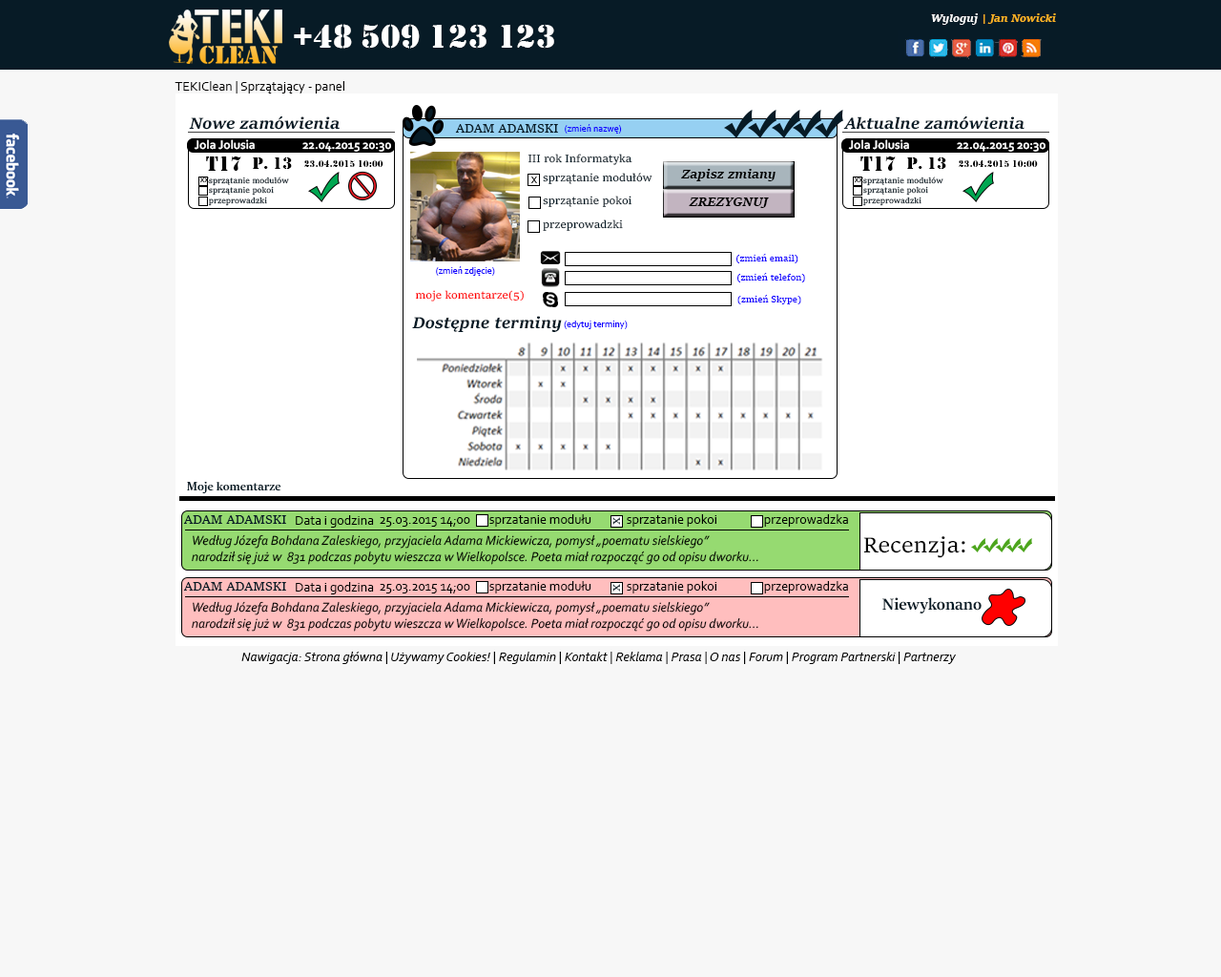
<style>
.page{position:relative;width:1221px;height:977px;background:#f7f7f7}
.page>*{position:absolute;margin:0}
.t1{font:11.4px "SitkaText-BoldItalic";color:#fcb324}
.t2{font:11.4px "SitkaText-BoldItalic";color:#ffffff}
.t3{font:34.3px "Stencil";color:#ffffff}
.t4{font:13.4px "Corbel";color:#010000}
.t5{font:17.2px "SitkaText-BoldItalic";color:#071b26}
.t6{font:13.4px "SitkaText";color:#071b26}
.t7{font:9.5px "Corbel";color:#1200ff}
.t8{font:12.6px "Corbel-Bold";color:#ffffff}
.t9{font:11.4px "SitkaText";color:#071b26}
.t10{font:21.1px "Stencil";color:#000000}
.t11{font:16.9px "Stencil";color:#000000}
.t12{font:9.8px "Stencil";color:#000000}
.t13{font:11.4px/23.7px "SitkaText";color:#071b26}
.t14{font:13.4px "SitkaText-BoldItalic";color:#000000}
.t15{font:13.4px "Corbel";color:#000000}
.t16{font:9.8px "Corbel";color:#000000}
.t17{font:8.4px "SitkaText";color:#071b26}
.t18{font:9.5px "SitkaText";color:#1200ff}
.t19{font:11.4px "SitkaText";color:#ff0000}
.t20{font:13.4px "SitkaBanner-Bold";color:#071b26}
.t21{font:13.8px "SitkaText";color:#071b26}
.t22{font:13.4px "Corbel-Italic";color:#000000}
.t23{font:23.4px "SitkaText";color:#000000}
.t24{font:18px "SitkaBanner-Bold";color:#071b26}
.t25{font:13.4px "Corbel-Italic";color:#010101}
</style>
<div class="page">
<p class="t1" style="left:931px;top:13px;width:125px;height:12px"><span class="t2">Wyloguj </span>| Jan Nowicki</p>
<p class="t3" style="left:294px;top:24px;width:260px;height:25px">+48 509 123 123</p>
<p class="t4" style="left:175px;top:81px;width:169px;height:12px">TEKIClean | Sprzątający - panel</p>
<p class="t5" style="left:189px;top:116px;width:151px;height:14px">Nowe zamówienia</p>
<p class="t6" style="left:455px;top:124px;width:103px;height:9px">ADAM ADAMSKI</p>
<p class="t7" style="left:565px;top:124px;width:57px;height:10px">(zmień nazwę)</p>
<p class="t5" style="left:843px;top:116px;width:181px;height:14px">Aktualne zamówienia</p>
<p class="t8" style="left:848px;top:139px;width:61px;height:11px">Jola Jolusia</p>
<p class="t8" style="left:957px;top:142px;width:88px;height:10px">22.04.2015 20:30</p>
<p class="t9" style="left:527px;top:154px;width:105px;height:11px">III rok Informatyka</p>
<p class="t10" style="left:860px;top:156px;width:36px;height:15px">T17</p>
<p class="t11" style="left:907px;top:157px;width:39px;height:12px">p. 13</p>
<p class="t12" style="left:959px;top:160px;width:79px;height:7px">23.04.2015 10:00</p>
<p class="t13" style="left:543px;top:173px;width:109px;height:58px">sprzątanie modułów<br>sprzątanie pokoi<br>przeprowadzki</p>
<p class="t14" style="left:681px;top:169px;width:94px;height:12px">Zapisz zmiany</p>
<p class="t15" style="left:530px;top:176px;width:7px;height:7px">x</p>
<p class="t16" style="left:855px;top:177px;width:8px;height:6px">xx</p>
<p class="t17" style="left:862px;top:176px;width:81px;height:30px">sprzątanie modułów<br>sprzątanie pokoi<br>przeprowadzki</p>
<p class="t14" style="left:689px;top:197px;width:80px;height:11px">ZREZYGNUJ</p>
<p class="t18" style="left:736px;top:254px;width:62px;height:9px">(zmień email)</p>
<p class="t7" style="left:436px;top:266px;width:59px;height:10px">(zmień zdjęcie)</p>
<p class="t18" style="left:737px;top:273px;width:68px;height:9px">(zmień telefon)</p>
<p class="t19" style="left:415px;top:290px;width:109px;height:11px">moje komentarze(5)</p>
<p class="t18" style="left:737px;top:295px;width:64px;height:9px">(zmień Skype)</p>
<p class="t5" style="left:412px;top:316px;width:150px;height:16px">Dostępne terminy</p>
<p class="t7" style="left:564px;top:320px;width:64px;height:9px">(edytuj terminy)</p>
<p class="t20" style="left:187px;top:482px;width:94px;height:11px">Moje komentarze</p>
<p class="t6" style="left:183px;top:515px;width:103px;height:9px">ADAM ADAMSKI</p>
<p class="t15" style="left:296px;top:515px;width:78px;height:12px">Data i godzina</p>
<p class="t15" style="left:380px;top:517px;width:90px;height:10px">25.03.2015 14;00</p>
<p class="t15" style="left:489px;top:514px;width:359px;height:13px">sprzatanie modułu  sprzatanie pokoi   przeprowadzka</p>
<p class="t21" style="left:612px;top:517px;width:8px;height:8px">x</p>
<p class="t22" style="left:192px;top:534px;width:566px;height:31px">Według Józefa Bohdana Zaleskiego, przyjaciela Adama Mickiewicza, pomysł „poematu sielskiego” <br>narodził się już w  831 podczas pobytu wieszcza w Wielkopolsce. Poeta miał rozpocząć go od opisu dworku...</p>
<p class="t23" style="left:863px;top:536px;width:102px;height:22px">Recenzja:</p>
<p class="t6" style="left:183px;top:582px;width:103px;height:8px">ADAM ADAMSKI</p>
<p class="t15" style="left:296px;top:582px;width:78px;height:12px">Data i godzina</p>
<p class="t15" style="left:489px;top:581px;width:359px;height:12px">sprzatanie modułu  sprzatanie pokoi   przeprowadzka</p>
<p class="t15" style="left:380px;top:584px;width:90px;height:9px">25.03.2015 14;00</p>
<p class="t21" style="left:612px;top:584px;width:8px;height:7px">x</p>
<p class="t22" style="left:192px;top:601px;width:566px;height:30px">Według Józefa Bohdana Zaleskiego, przyjaciela Adama Mickiewicza, pomysł „poematu sielskiego” <br>narodził się już w  831 podczas pobytu wieszcza w Wielkopolsce. Poeta miał rozpocząć go od opisu dworku...</p>
<p class="t24" style="left:882px;top:597px;width:99px;height:16px">Niewykonano</p>
<p class="t25" style="left:241px;top:651px;width:716px;height:13px">Nawigacja: Strona główna | Używamy Cookies! | Regulamin | Kontakt | Reklama | Prasa | O nas | Forum | Program Partnerski | Partnerzy</p>
</div>
